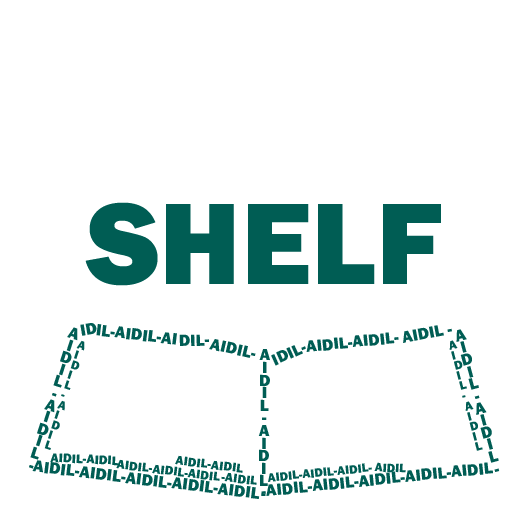
<style>
.page{position:relative;width:512px;height:512px;background:#ffffff}
.page>*{position:absolute;margin:0}
.t1{font:120px "FranklinGothic-Heavy";color:#005d54}
.t2{font:16.8px/12.6px "FranklinGothic-Heavy";color:#005d54}
.t3{font:16.8px "FranklinGothic-Heavy";color:#005d54}
.t4{font:12.6px/10.5px "FranklinGothic-Heavy";color:#005d54}
.t5{font:12.9px "FranklinGothic-Heavy";color:#005d54}
.t6{font:12.6px "FranklinGothic-Heavy";color:#005d54}
</style>
<div class="page">
<p class="t1" style="left:85px;top:202px;width:356px;height:84px">SHELF</p>
<p class="t2" style="left:29px;top:327px;width:49px;height:142px;text-align:center;rotate:18deg">A<br>I<br>D<br>I<br>L<br>-<br>A<br>I<br>D<br>I<br>L<br>-</p>
<p class="t3" style="left:80px;top:323px;width:17px;height:13px;rotate:-10deg">ID</p>
<p class="t3" style="left:96px;top:324px;width:81px;height:21px;rotate:7deg">IL-AIDIL-AI</p>
<p class="t3" style="left:403px;top:325px;width:49px;height:18px;rotate:-11deg">AIDIL -</p>
<p class="t2" style="left:456px;top:329px;width:44px;height:143px;text-align:center;rotate:-15deg">A<br>I<br>D<br>I<br>L<br>-<br>A<br>I<br>D<br>I<br>L<br>-</p>
<p class="t4" style="left:44px;top:340px;width:41px;height:110px;rotate:18deg">A<br>I<br>D<br>I<br>L<br>-<br>A<br>I<br>D<br>I<br>L</p>
<p class="t3" style="left:179px;top:334px;width:30px;height:12px;rotate:-2deg">DIL-</p>
<p class="t3" style="left:209px;top:339px;width:47px;height:19px;rotate:13deg">AIDIL-</p>
<p class="t3" style="left:306px;top:332px;width:93px;height:20px;rotate:-6deg">AIDIL-AIDIL-</p>
<p class="t4" style="left:449px;top:340px;width:34px;height:111px;rotate:-15deg">A<br>I<br>D<br>I<br>L<br>-<br>A<br>I<br>D<br>I<br>L</p>
<p class="t2" style="left:258px;top:349px;width:12px;height:147px;text-align:center;rotate:1deg">A<br>I<br>D<br>I<br>L<br>-<br>A<br>I<br>D<br>I<br>L<br>-</p>
<p class="t3" style="left:271px;top:345px;width:35px;height:21px;rotate:-24deg">IDIL-</p>
<p class="t3" style="left:32px;top:460px;width:228px;height:39px;rotate:7deg">AIDIL-AIDIL-AIDIL-AIDIL-AIDIL</p>
<p class="t5" style="left:50px;top:453px;width:69px;height:13px;rotate:3deg">AIDIL-AIDIL</p>
<p class="t5" style="left:116px;top:459px;width:104px;height:22px;rotate:7deg">AIDIL-AIDIL-AIDIL</p>
<p class="t5" style="left:175px;top:455px;width:68px;height:18px;rotate:7deg">AIDIL-AIDIL</p>
<p class="t3" style="left:261px;top:462px;width:232px;height:34px;rotate:-6deg">-AIDIL-AIDIL-AIDIL-AIDIL-AIDIL</p>
<p class="t6" style="left:374px;top:462px;width:32px;height:11px;rotate:3deg">AIDIL</p>
<p class="t5" style="left:221px;top:472px;width:36px;height:13px;rotate:7deg">-AIDIL</p>
<p class="t6" style="left:268px;top:463px;width:104px;height:19px;rotate:-6deg">AIDIL-AIDIL-AIDIL-</p>
</div>
